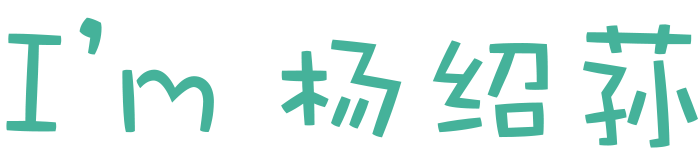
<style>
.page{position:relative;width:700px;height:168px;background:#ffffff}
.page>*{position:absolute;margin:0}
.t1{font:148px "DFWaWaSC-W5";color:#45b29a}
</style>
<div class="page">
<p class="t1" style="left:6px;top:17px;width:692px;height:131px">I’m 杨绍荪</p>
</div>
